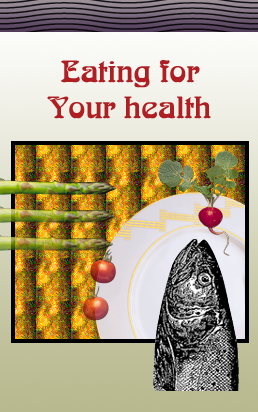
<style>
.page{position:relative;width:258px;height:412px}
.page>*{position:absolute;margin:0}
.t1{font:30px "VNT-ArabNormal";color:#af1e23}
</style>
<div class="page">
<p class="t1" style="left:47px;top:60px;width:164px;height:59px;text-align:center">Eating for<br>Your health</p>
</div>
